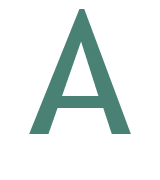
<style>
.page{position:relative;width:160px;height:180px;background:#ffffff}
.page>*{position:absolute;margin:0}
.t1{font:173.5px "TrebuchetMS";color:#498275}
</style>
<div class="page">
<p class="t1" style="left:29px;top:9px;width:102px;height:125px">A</p>
</div>
